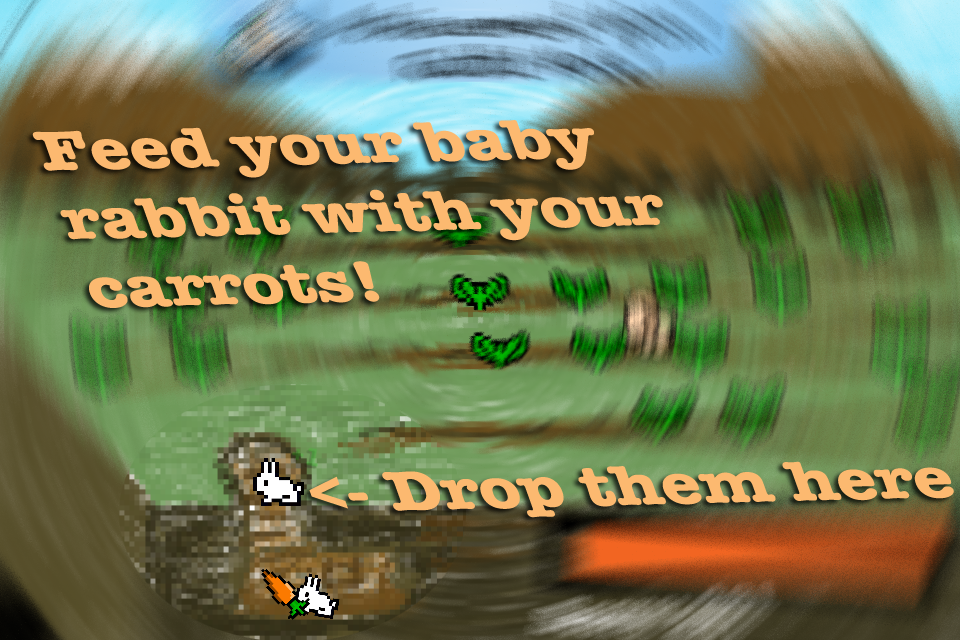
<style>
.page{position:relative;width:960px;height:640px}
.page>*{position:absolute;margin:0}
.t1{font:60.6px "AmericanTypewriter-Bold";color:#fcb970;scale:1.2 1}
</style>
<div class="page">
<p class="t1" style="left:32px;top:120px;width:631px;height:188px;rotate:-1deg">Feed your baby<br>rabbit with your<br>carrots!</p>
<p class="t1" style="left:309px;top:461px;width:645px;height:57px;rotate:-1deg">&lt;- Drop them here</p>
</div>
